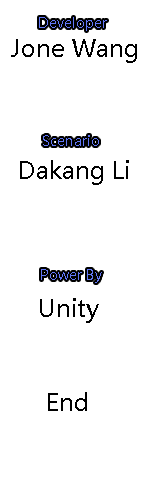
<style>
.page{position:relative;width:150px;height:500px;background:#ffffff}
.page>*{position:absolute;margin:0}
.t1{font:14px "MicrosoftYaHei";color:#6278f8}
.t2{font:24px "MicrosoftYaHei";color:#000000}
</style>
<div class="page">
<p class="t1" style="left:39px;top:17px;width:68px;height:14px">Developer</p>
<p class="t2" style="left:11px;top:39px;width:126px;height:24px">Jone Wang</p>
<p class="t1" style="left:43px;top:135px;width:56px;height:11px">Scenario</p>
<p class="t2" style="left:20px;top:160px;width:109px;height:25px">Dakang Li</p>
<p class="t1" style="left:41px;top:269px;width:61px;height:14px">Power By</p>
<p class="t2" style="left:40px;top:298px;width:59px;height:25px">Unity</p>
<p class="t2" style="left:48px;top:392px;width:39px;height:19px">End</p>
</div>
